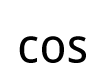
<style>
.page{position:relative;width:105px;height:83px;background:#ffffff}
.page>*{position:absolute;margin:0}
.t1{font:47.9px "DroidSans";color:#000000}
</style>
<div class="page">
<p class="t1" style="left:19px;top:36px;width:67px;height:27px">cos</p>
</div>
